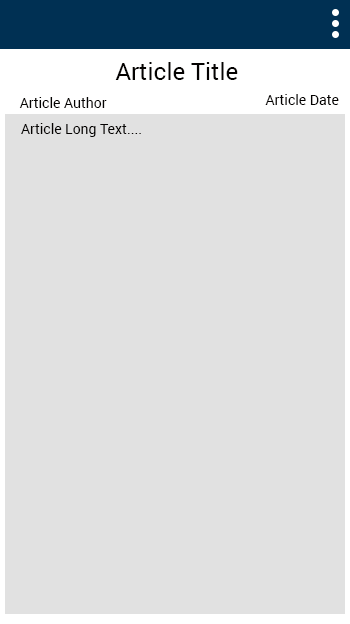
<style>
.page{position:relative;width:350px;height:624px;background:#e1e1e1}
.page>*{position:absolute;margin:0}
.t1{font:24px "Roboto-Regular";color:#040201}
.t2{font:14px "Roboto-Regular";color:#040201}
</style>
<div class="page">
<p class="t1" style="left:115px;top:62px;width:123px;height:18px">Article Title</p>
<p class="t2" style="left:19px;top:97px;width:88px;height:11px">Article Author</p>
<p class="t2" style="left:265px;top:94px;width:74px;height:11px">Article Date</p>
<p class="t2" style="left:21px;top:123px;width:120px;height:14px">Article Long Text....</p>
</div>
